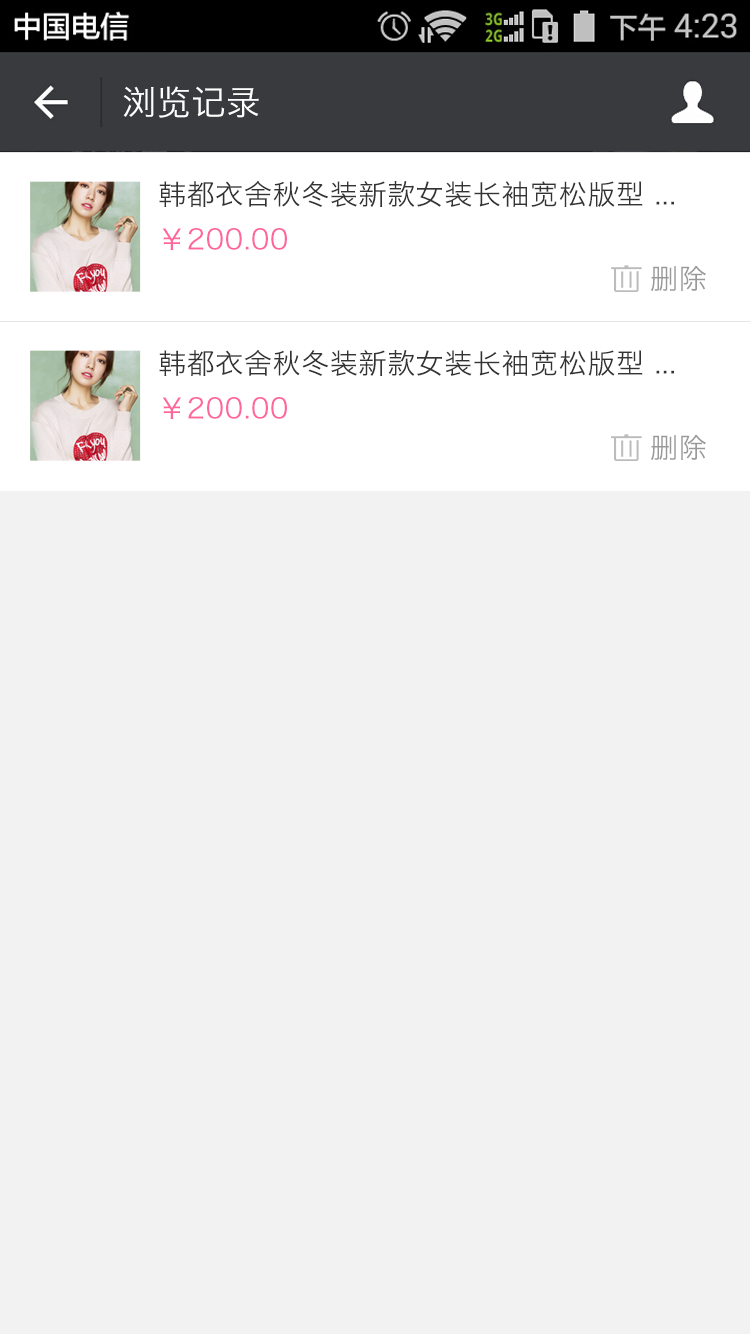
<style>
.page{position:relative;width:750px;height:1334px;background:#f2f2f2}
.page>*{position:absolute;margin:0}
.t1{font:34px "HiraginoSansGB-W3";letter-spacing:0.022em;color:#ffffff}
.t2{font:28px "HiraginoSansGB-W3";letter-spacing:0.022em;color:#333333}
.t3{font:28px "HiraginoSansGB-W3";letter-spacing:0.022em;color:#ff6699}
.t4{font:28px "HiraginoSansGB-W3";letter-spacing:0.02em;color:#999999}
</style>
<div class="page">
<p class="t1" style="left:123px;top:86px;width:136px;height:32px">浏览记录</p>
<p class="t2" style="left:159px;top:180px;width:515px;height:27px">韩都衣舍秋冬装新款女装长袖宽松版型 ...</p>
<p class="t3" style="left:162px;top:228px;width:125px;height:22px">￥200.00</p>
<p class="t4" style="left:650px;top:265px;width:56px;height:26px">删除</p>
<p class="t2" style="left:159px;top:349px;width:515px;height:27px">韩都衣舍秋冬装新款女装长袖宽松版型 ...</p>
<p class="t3" style="left:162px;top:397px;width:125px;height:22px">￥200.00</p>
<p class="t4" style="left:650px;top:434px;width:56px;height:26px">删除</p>
</div>
